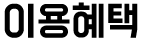
<style>
.page{position:relative;width:142px;height:41px;background:#ffffff}
.page>*{position:absolute;margin:0}
.t1{font:36px "BMDoHyeon";color:#000000}
</style>
<div class="page">
<p class="t1" style="left:4px;top:2px;width:134px;height:36px">이용혜택</p>
</div>
